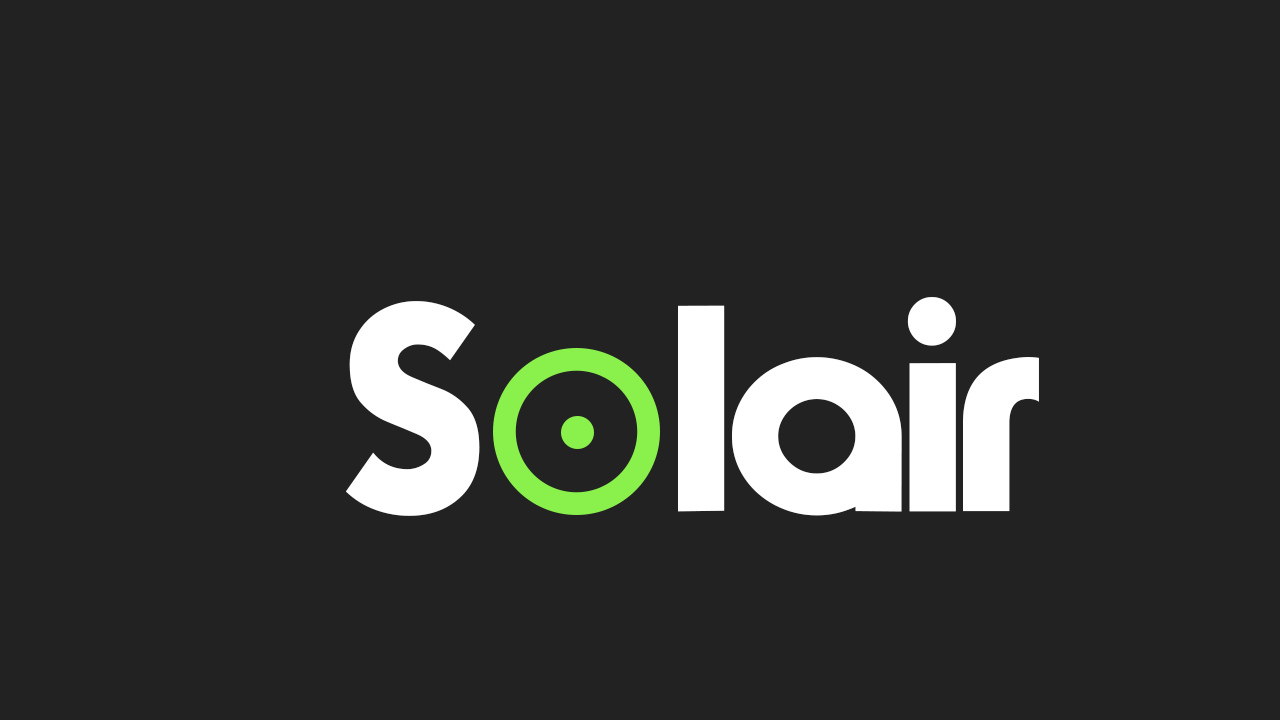
<style>
.page{position:relative;width:1280px;height:720px;background:#222222}
.page>*{position:absolute;margin:0}
.t1{font:296.1px "TypoGraphica";color:#ffffff}
</style>
<div class="page">
<p class="t1" style="left:346px;top:297px;width:693px;height:219px">S     lair</p>
</div>
